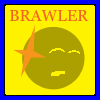
<style>
.page{position:relative;width:100px;height:100px;background:#fff200}
.page>*{position:absolute;margin:0}
.t1{font:16px "Georgia";color:#f26522}
</style>
<div class="page">
<p class="t1" style="left:9px;top:10px;width:80px;height:12px">BRAWLER</p>
</div>
